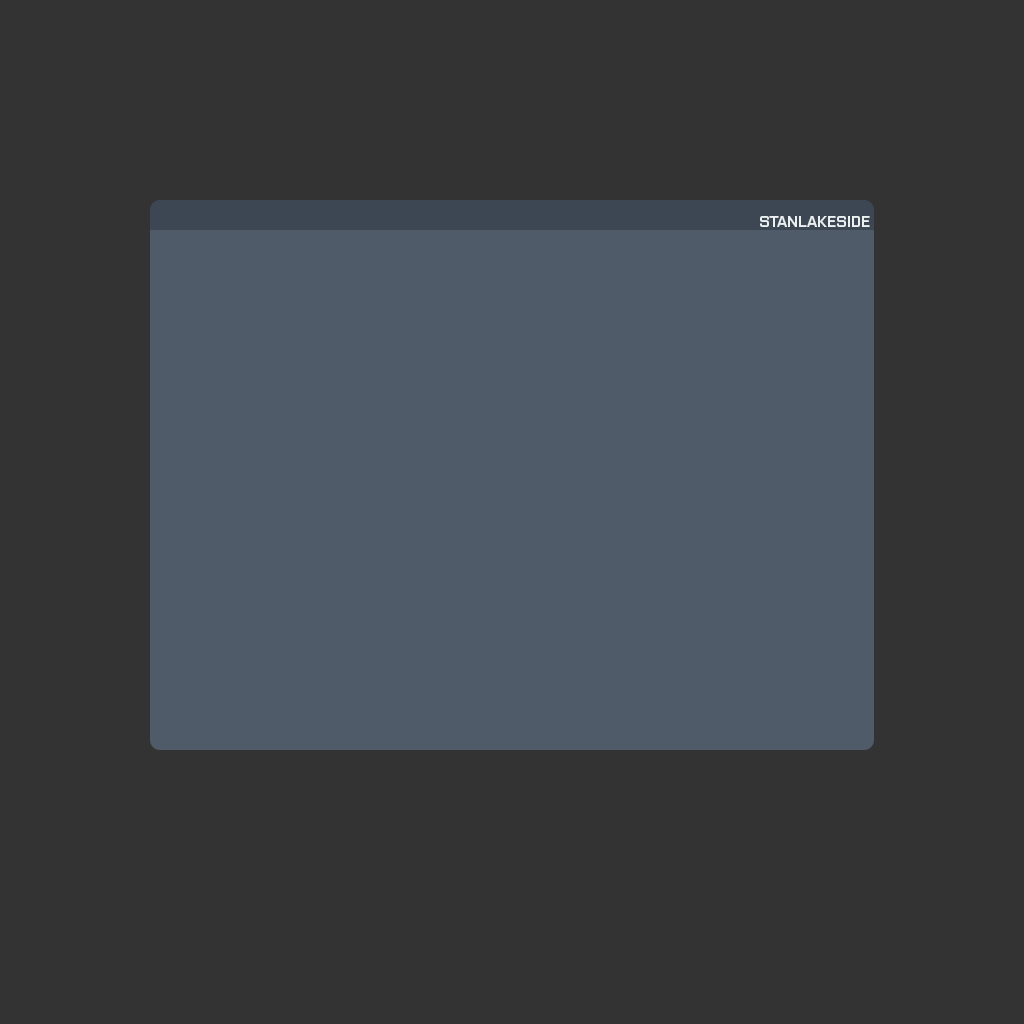
<style>
.page{position:relative;width:1024px;height:1024px;background:#333333}
.page>*{position:absolute;margin:0}
.t1{font:16px "Purista-SemiBold";color:#ecf0f1}
</style>
<div class="page">
<p class="t1" style="left:760px;top:216px;width:110px;height:11px">STANLAKESIDE</p>
</div>
